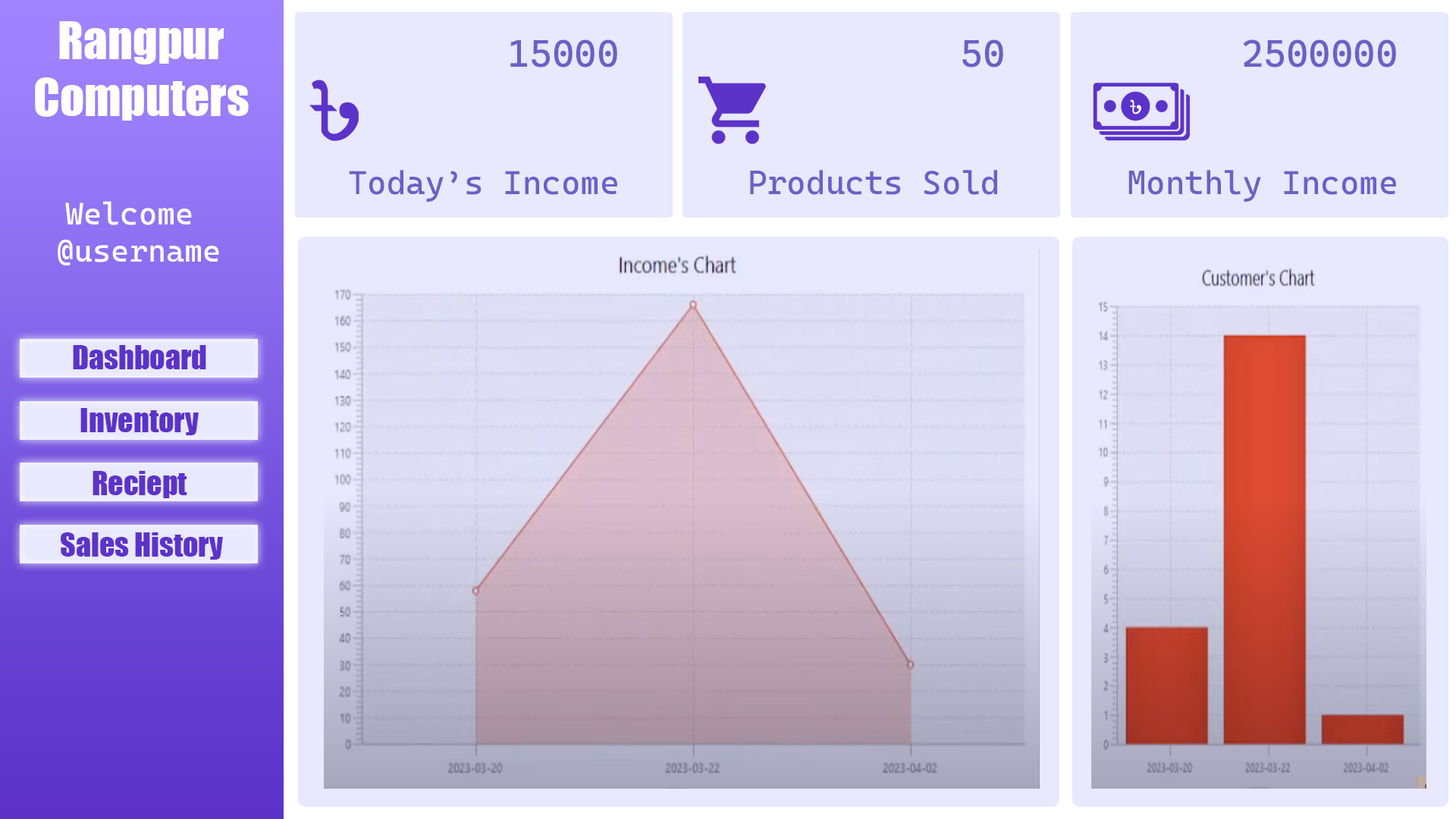
<style>
.page{position:relative;width:1456px;height:819px;background:#e8e8fe}
.page>*{position:absolute;margin:0}
.t1{font:47.7px "Impact";color:#ffffff}
.t2{font:38.3px "CascadiaCode-Roman";color:#6c5fc7}
.t3{font:33.1px "CascadiaCode-Roman";color:#6c5fc7}
.t4{font:31.3px "CascadiaCode-Roman";color:#ffffff}
.t5{font:30.1px "Impact";color:#5c33c9}
</style>
<div class="page">
<p class="t1" style="left:35px;top:21px;width:214px;height:100px;text-align:center">Rangpur<br>Computers</p>
<p class="t2" style="left:510px;top:39px;width:107px;height:28px">15000</p>
<p class="t2" style="left:962px;top:39px;width:41px;height:28px">50</p>
<p class="t2" style="left:1243px;top:39px;width:153px;height:28px">2500000</p>
<p class="t3" style="left:349px;top:170px;width:268px;height:32px">Today’s Income</p>
<p class="t3" style="left:750px;top:170px;width:247px;height:25px">Products Sold</p>
<p class="t3" style="left:1128px;top:170px;width:268px;height:32px">Monthly Income</p>
<p class="t4" style="left:58px;top:201px;width:161px;height:64px;text-align:center">Welcome<br> @username</p>
<p class="t5" style="left:73px;top:345px;width:133px;height:24px">Dashboard</p>
<p class="t5" style="left:80px;top:408px;width:119px;height:27px">Inventory</p>
<p class="t5" style="left:93px;top:471px;width:94px;height:27px">Reciept</p>
<p class="t5" style="left:61px;top:532px;width:162px;height:28px">Sales History</p>
</div>
